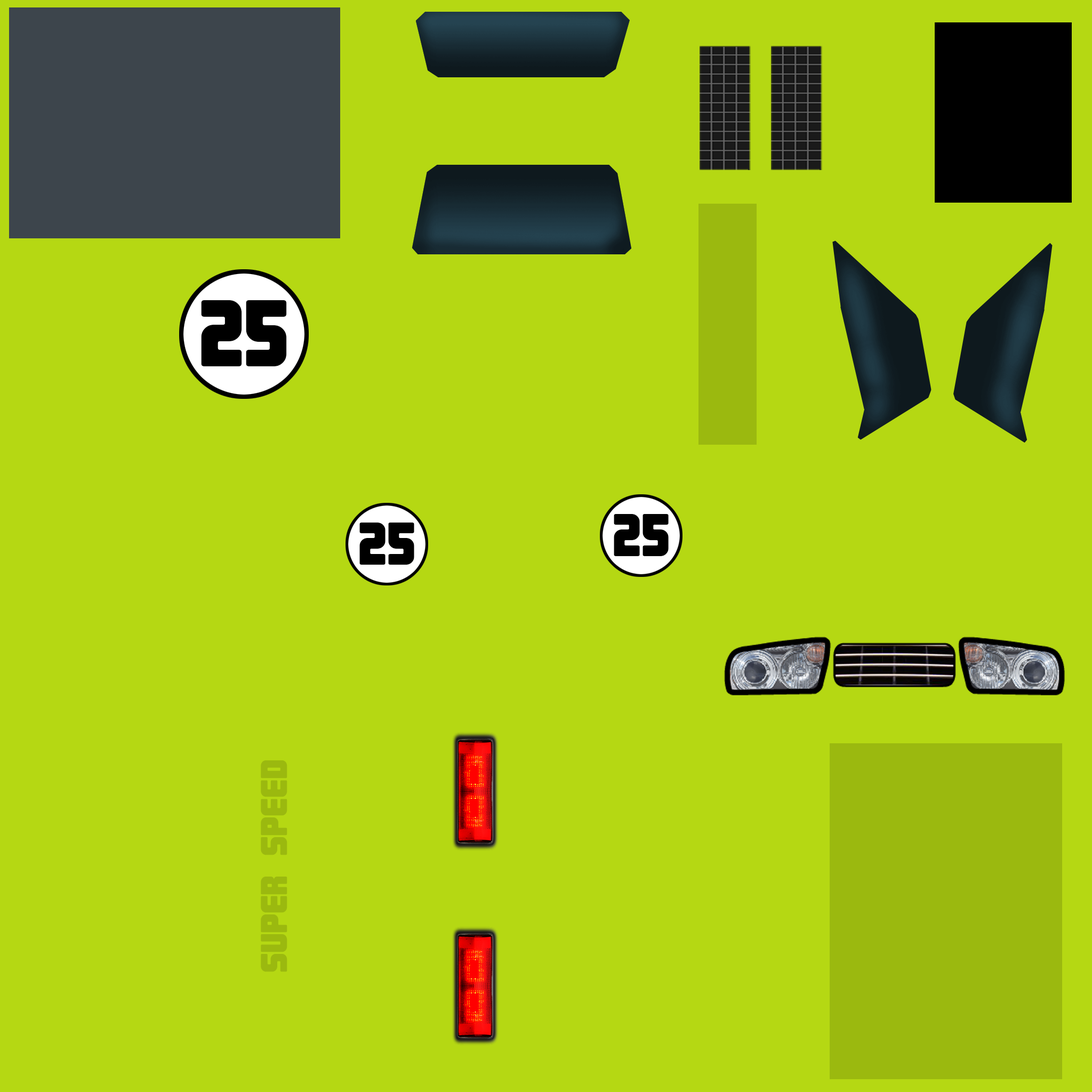
<style>
.page{position:relative;width:1092px;height:1092px;background:#b5d813}
.page>*{position:absolute;margin:0}
.t1{font:95.2px "Magnum";color:#000000;font-variant:small-caps}
.t2{font:60.7px "Magnum";color:#000000;font-variant:small-caps}
.t3{font:53.8px "Magnum";color:#9bb90f;font-variant:small-caps;scale:1.11 1}
</style>
<div class="page">
<p class="t1" style="left:201px;top:300px;width:86px;height:66px">25</p>
<p class="t2" style="left:614px;top:514px;width:55px;height:42px">25</p>
<p class="t2" style="left:359px;top:523px;width:55px;height:42px">25</p>
<p class="t3" style="left:261px;top:760px;width:26px;height:212px;rotate:-90deg">super speed</p>
</div>
